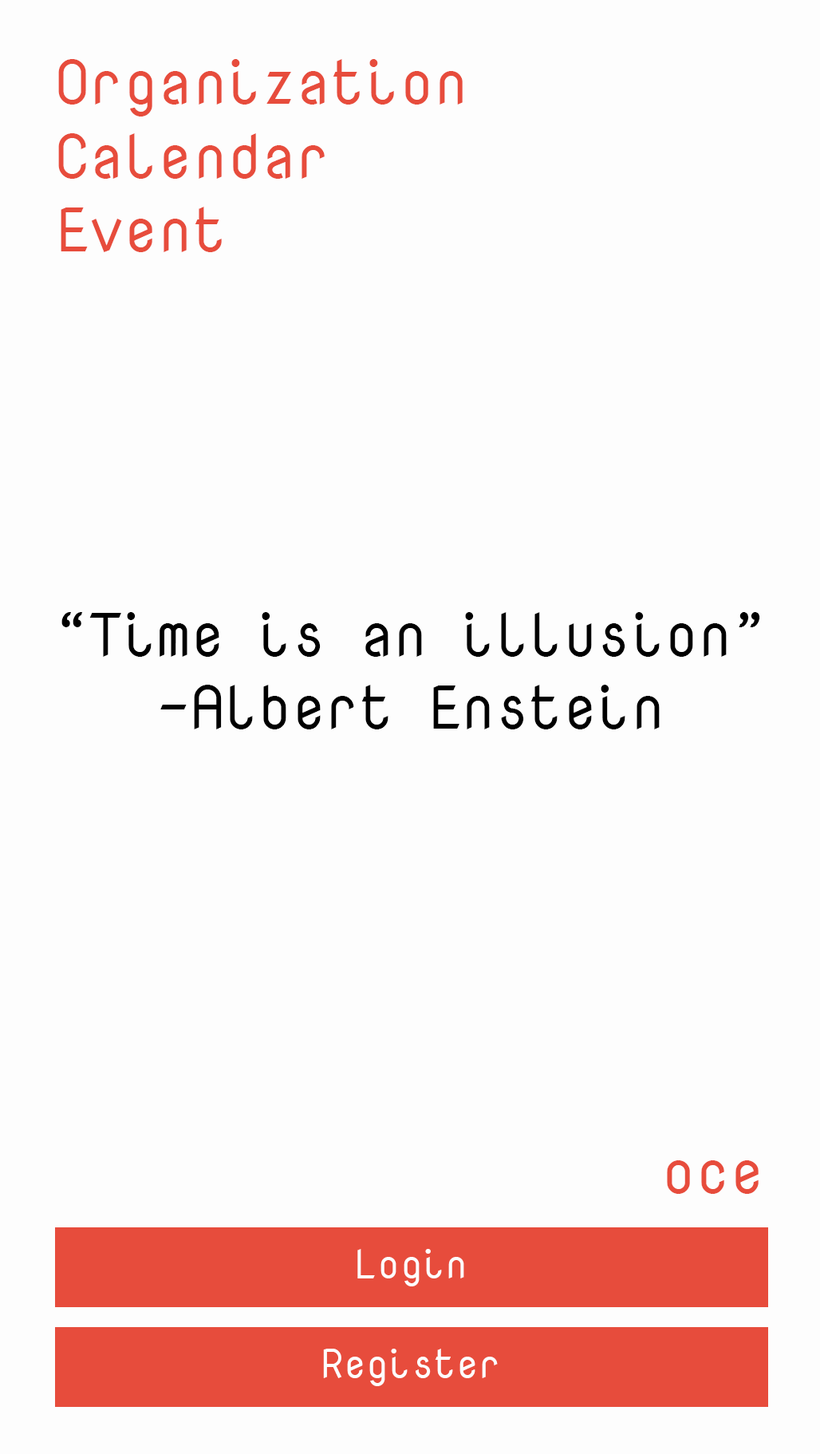
<style>
.page{position:relative;width:820px;height:1454px;background:#fdfdfd}
.page>*{position:absolute;margin:0}
.t1{font:46.1px "NovaMono";color:#e74c3c}
.t2{font:45.7px "NovaMono";color:#000000}
.t3{font:29.9px "NovaMono";color:#fdfdfd}
</style>
<div class="page">
<p class="t1" style="left:58px;top:59px;width:405px;height:193px">Organization<br>Calendar<br>Event</p>
<p class="t2" style="left:61px;top:612px;width:699px;height:117px;text-align:center">“Time is an illusion”<br>-Albert Enstein</p>
<p class="t1" style="left:667px;top:1160px;width:92px;height:34px">oce</p>
<p class="t3" style="left:357px;top:1249px;width:107px;height:37px">Login</p>
<p class="t3" style="left:323px;top:1348px;width:175px;height:38px">Register</p>
</div>
